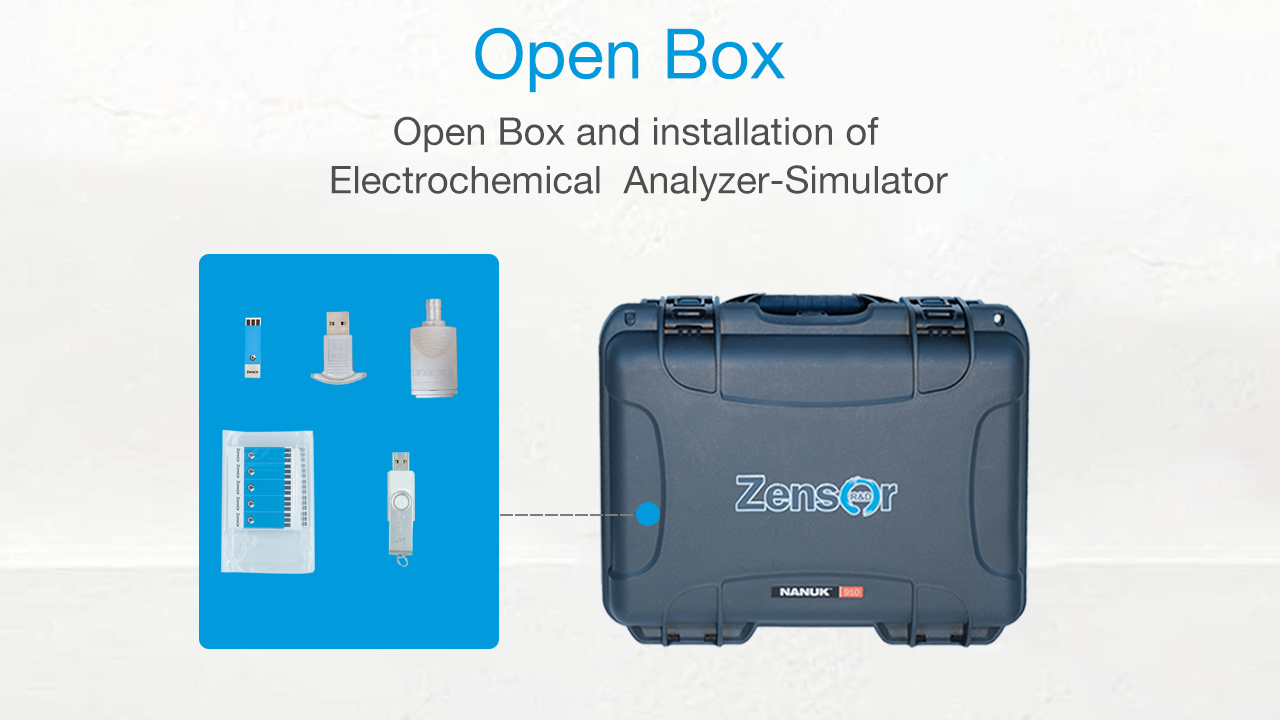
<style>
.page{position:relative;width:1280px;height:720px}
.page>*{position:absolute;margin:0}
.t1{font:69.6px "HelveticaNeue";color:#019add}
.t2{font:38.3px "HelveticaNeue";color:#4f4f4f}
</style>
<div class="page">
<p class="t1" style="left:475px;top:27px;width:311px;height:66px">Open Box</p>
<p class="t2" style="left:394px;top:116px;width:485px;height:37px">Open Box and installation of</p>
<p class="t2" style="left:331px;top:165px;width:617px;height:37px">Electrochemical  Analyzer-Simulator</p>
</div>
